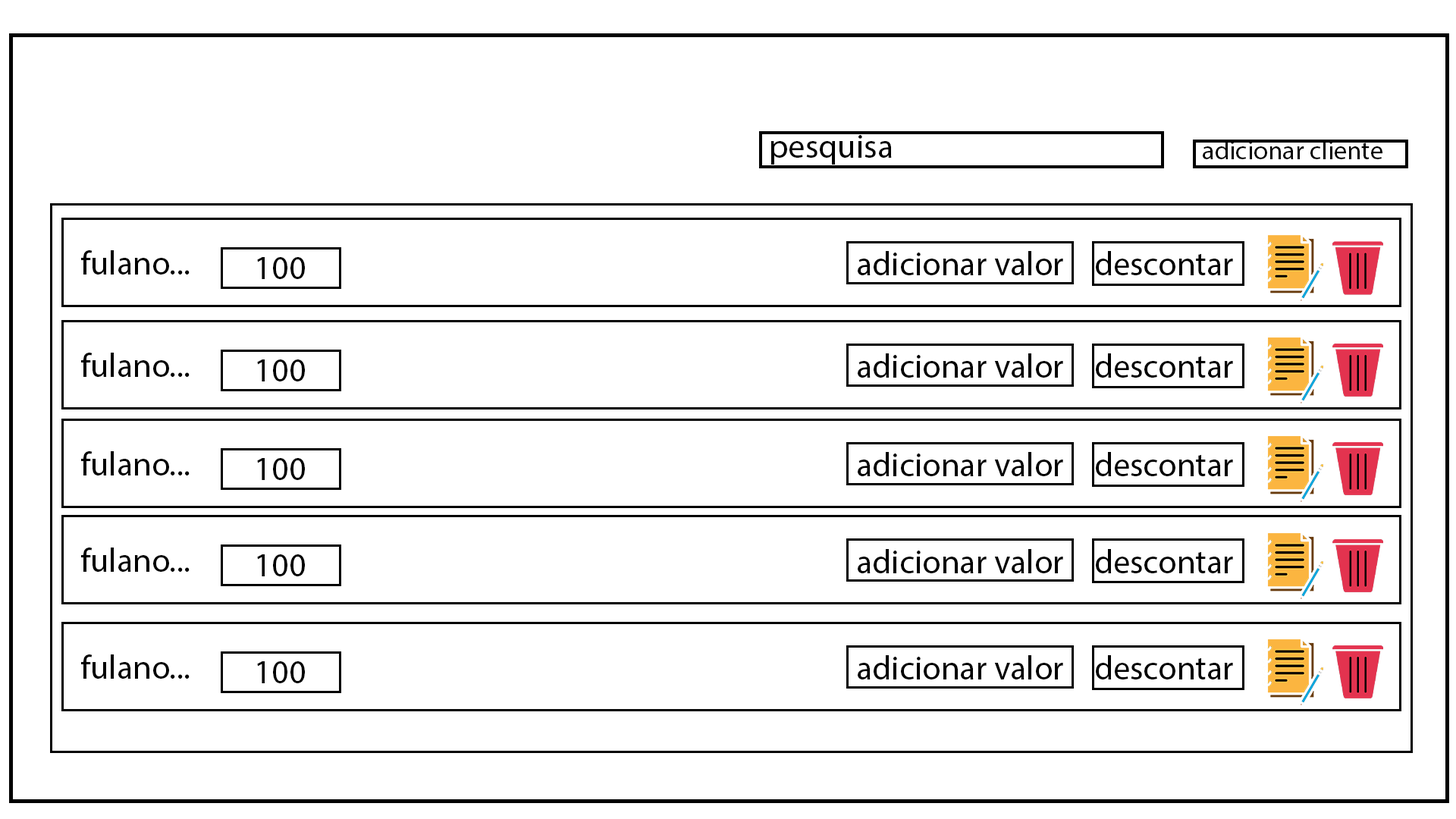
<style>
.page{position:relative;width:1456px;height:819px;background:#ffffff}
.page>*{position:absolute;margin:0}
.t1{font:33.7px "MyriadPro-Regular";color:#000000}
.t2{font:26.3px "MyriadPro-Regular";color:#000000}
</style>
<div class="page">
<p class="t1" style="left:770px;top:135px;width:122px;height:30px">pesquisa</p>
<p class="t2" style="left:1203px;top:140px;width:179px;height:19px">adicionar cliente</p>
<p class="t1" style="left:81px;top:250px;width:109px;height:25px">fulano...</p>
<p class="t1" style="left:257px;top:257px;width:48px;height:22px">100</p>
<p class="t1" style="left:858px;top:251px;width:205px;height:24px">adicionar valor</p>
<p class="t1" style="left:1096px;top:251px;width:137px;height:24px">descontar</p>
<p class="t1" style="left:81px;top:353px;width:109px;height:24px">fulano...</p>
<p class="t1" style="left:858px;top:353px;width:205px;height:25px">adicionar valor</p>
<p class="t1" style="left:1096px;top:353px;width:137px;height:25px">descontar</p>
<p class="t1" style="left:257px;top:359px;width:48px;height:22px">100</p>
<p class="t1" style="left:81px;top:451px;width:109px;height:24px">fulano...</p>
<p class="t1" style="left:257px;top:458px;width:48px;height:22px">100</p>
<p class="t1" style="left:858px;top:452px;width:205px;height:24px">adicionar valor</p>
<p class="t1" style="left:1096px;top:452px;width:137px;height:24px">descontar</p>
<p class="t1" style="left:81px;top:548px;width:109px;height:24px">fulano...</p>
<p class="t1" style="left:257px;top:554px;width:48px;height:22px">100</p>
<p class="t1" style="left:858px;top:549px;width:205px;height:24px">adicionar valor</p>
<p class="t1" style="left:1096px;top:549px;width:137px;height:24px">descontar</p>
<p class="t1" style="left:81px;top:654px;width:109px;height:25px">fulano...</p>
<p class="t1" style="left:257px;top:661px;width:48px;height:22px">100</p>
<p class="t1" style="left:858px;top:655px;width:205px;height:24px">adicionar valor</p>
<p class="t1" style="left:1096px;top:655px;width:137px;height:24px">descontar</p>
</div>
